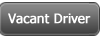
<style>
.page{position:relative;width:100px;height:38px}
.page>*{position:absolute;margin:0}
.t1{font:13px "Tahoma";color:#ffffff;font-weight:bold}
</style>
<div class="page">
<p class="t1" style="left:8px;top:13px;width:83px;height:11px">Vacant Driver</p>
</div>
